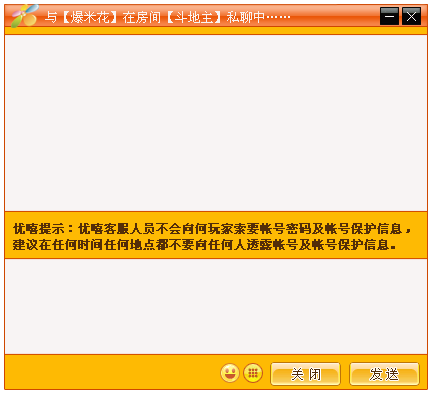
<style>
.page{position:relative;width:431px;height:394px;background:#f8f4f4}
.page>*{position:absolute;margin:0}
.t1{font:13px "SimSun";color:#f8f4f4}
.t2{font:11.7px/16px "SimSun";color:#532d08;font-weight:bold}
.t3{font:13px "SimSun";letter-spacing:0.26em;color:#532d08}
</style>
<div class="page">
<p class="t1" style="left:45px;top:11px;width:245px;height:12px">与【爆米花】在房间【斗地主】私聊中……</p>
<p class="t2" style="left:13px;top:223px;width:397px;height:27px">优嘻提示：优嘻客服人员不会向何玩家索要帐号密码及帐号保护信息，<br>建议在任何时间任何地点都不要向任何人透露帐号及帐号保护信息。</p>
<p class="t3" style="left:292px;top:368px;width:28px;height:12px">关闭</p>
<p class="t3" style="left:370px;top:368px;width:28px;height:12px">发送</p>
</div>
